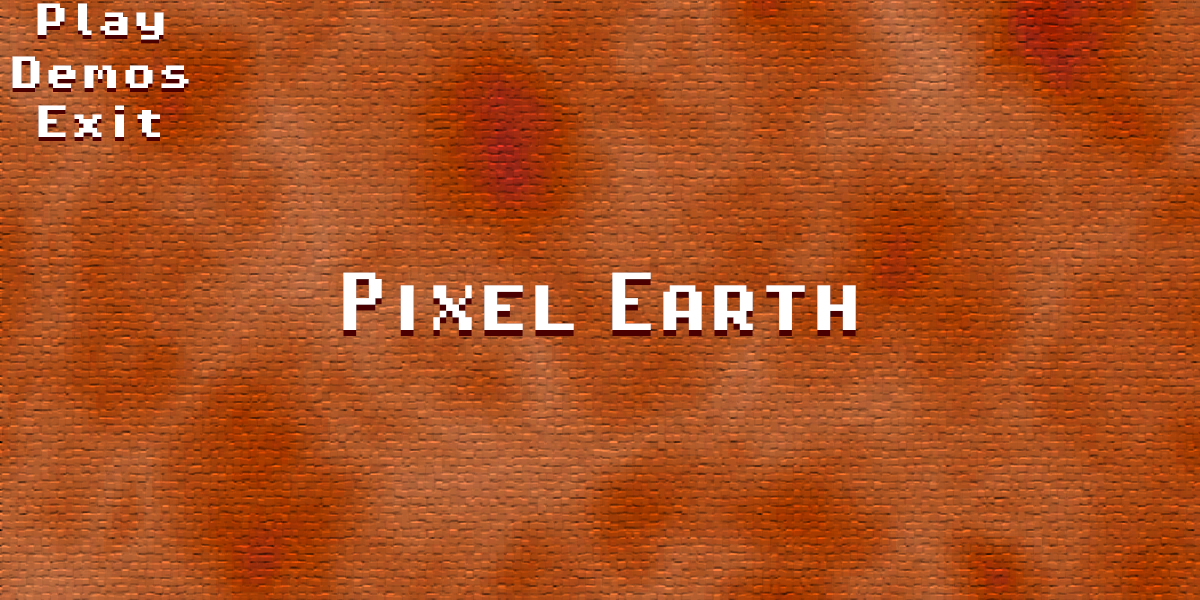
<style>
.page{position:relative;width:1200px;height:600px}
.page>*{position:absolute;margin:0}
.t1{font:36px "PixelOperator8-Bold";color:#ffffff}
.t2{font:36px "PixelOperator8-Bold"}
.t3{font:102.4px "PixelOperatorHBSC"}
.t4{font:102.4px "PixelOperatorHBSC";color:#ffffff}
</style>
<div class="page">
<p class="t1" style="left:37px;top:3px;width:127px;height:37px">Play</p>
<p class="t2" style="left:37px;top:7px;width:127px;height:37px">Play</p>
<p class="t1" style="left:12px;top:56px;width:177px;height:32px">Demos</p>
<p class="t1" style="left:38px;top:105px;width:122px;height:32px">Exit</p>
<p class="t3" style="left:343px;top:278px;width:513px;height:58px">Pixel Earth</p>
<p class="t4" style="left:343px;top:272px;width:513px;height:58px">Pixel Earth</p>
</div>
